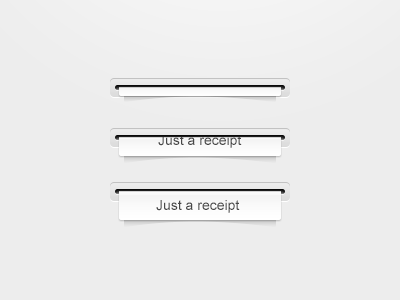
<style>
.page{position:relative;width:400px;height:300px;background:#ededed}
.page>*{position:absolute;margin:0}
.t1{font:14px "ArialMT";color:#474747}
</style>
<div class="page">
<p class="t1" style="left:158px;top:135px;width:84px;height:13px">Just a receipt</p>
<p class="t1" style="left:156px;top:200px;width:84px;height:13px">Just a receipt</p>
</div>
